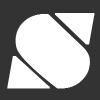
<style>
.page{position:relative;width:100px;height:100px;background:#ffffff}
.page>*{position:absolute;margin:0}
.t1{font:96px "Braggadocio";letter-spacing:0.02em;color:#ffffff;font-weight:bold;font-style:italic}
</style>
<div class="page">
<p class="t1" style="left:7px;top:13px;width:88px;height:76px">S</p>
</div>
